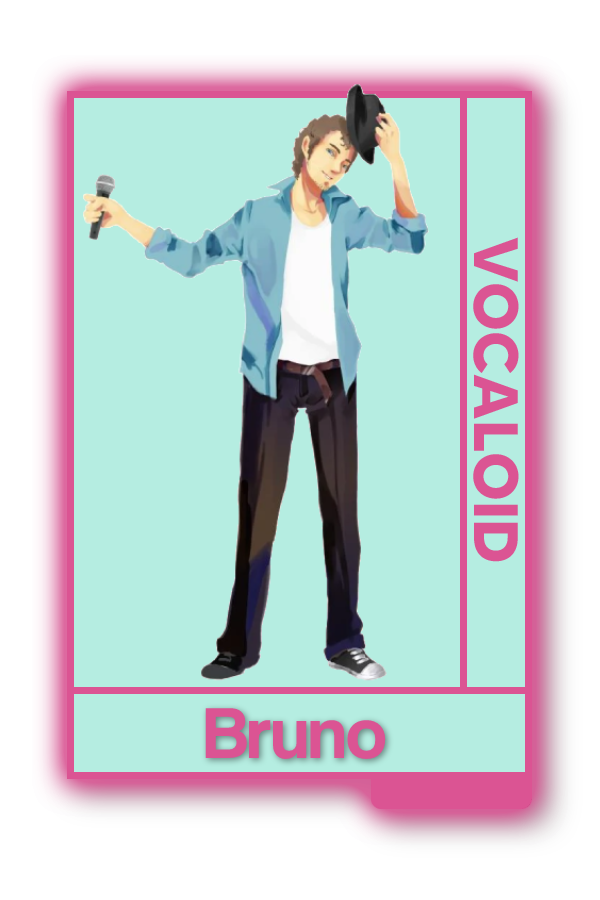
<style>
.page{position:relative;width:600px;height:900px;background:#b5ede1}
.page>*{position:absolute;margin:0}
.t1{font:62.5px "MADETOMMY-Bold";color:#db5493}
.t2{font:75px "CoolveticaRg-Regular";color:#db5493}
</style>
<div class="page">
<p class="t1" style="left:473px;top:237px;width:46px;height:325px;rotate:90deg">VOCALOID</p>
<p class="t2" style="left:205px;top:708px;width:181px;height:51px">Bruno</p>
</div>
